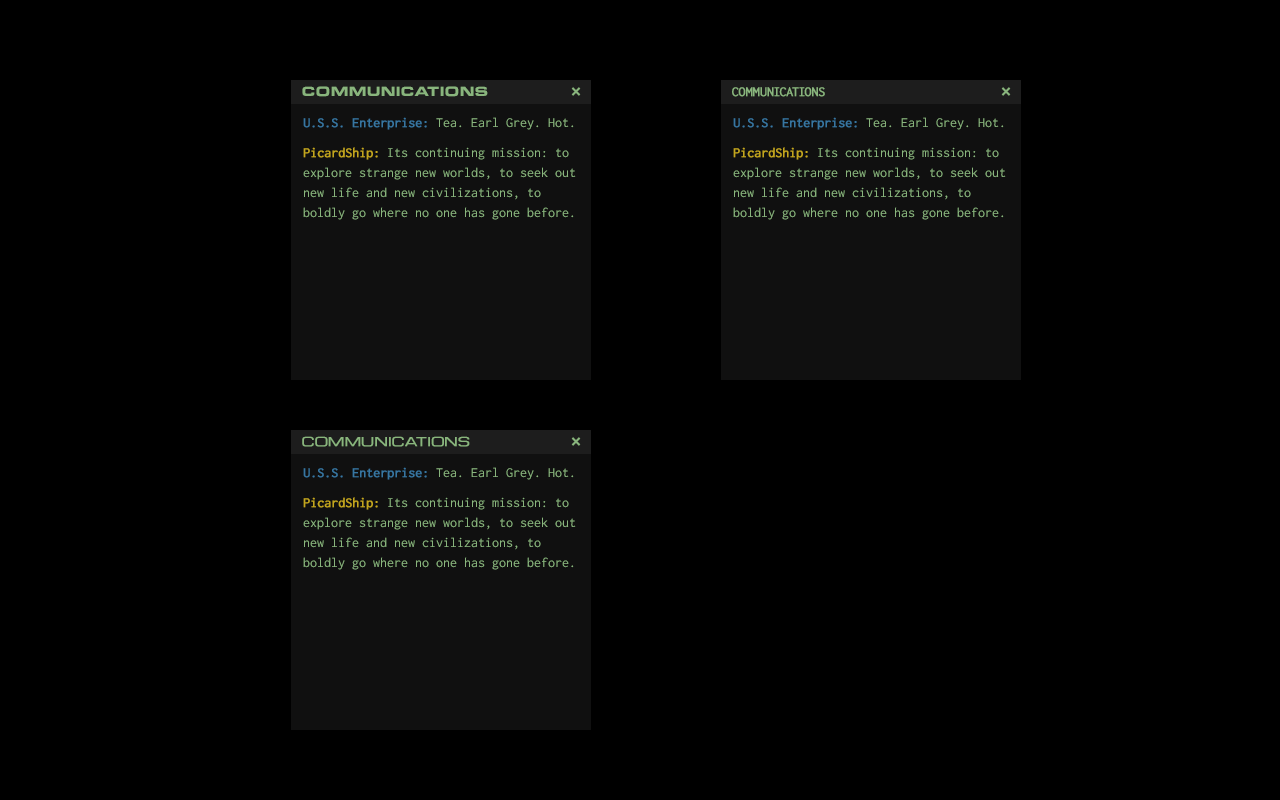
<style>
.page{position:relative;width:1280px;height:800px;background:#000000}
.page>*{position:absolute;margin:0}
.t1{font:14px "EurostileExt-Bla";color:#89b57d}
.t2{font:18px "HelveticaNeue-Bold";color:#89b57d}
.t3{font:14px "Inconsolata";color:#89b57d;font-weight:bold}
.t4{font:14px/20px "Inconsolata";color:#89b57d}
.t5{font:14px/20px "Inconsolata";color:#3776a1;font-weight:bold}
.t6{font:14px/30px "Inconsolata";color:#c3a61e;font-weight:bold}
.t7{font:14px/30px "Inconsolata";color:#89b57d}
.t8{font:12px "Michroma";color:#89b57d;font-weight:bold}
</style>
<div class="page">
<p class="t1" style="left:302px;top:86px;width:186px;height:11px">COMMUNICATIONS</p>
<p class="t2" style="left:571px;top:87px;width:10px;height:9px">×</p>
<p class="t3" style="left:732px;top:87px;width:93px;height:10px">COMMUNICATIONS</p>
<p class="t2" style="left:1001px;top:87px;width:10px;height:9px">×</p>
<p class="t4" style="left:303px;top:117px;width:273px;height:103px"><span class="t5">U.S.S. Enterprise:</span> Tea. Earl Grey. Hot.<br><span class="t6">PicardShip:</span><span class="t7"> Its continuing mission: to </span>explore strange new worlds, to seek out new life and new civilizations, to boldly go where no one has gone before.</p>
<p class="t4" style="left:733px;top:117px;width:273px;height:103px"><span class="t5">U.S.S. Enterprise:</span> Tea. Earl Grey. Hot.<br><span class="t6">PicardShip:</span><span class="t7"> Its continuing mission: to </span>explore strange new worlds, to seek out new life and new civilizations, to boldly go where no one has gone before.</p>
<p class="t8" style="left:302px;top:436px;width:168px;height:11px">COMMUNICATIONS</p>
<p class="t2" style="left:571px;top:437px;width:10px;height:9px">×</p>
<p class="t4" style="left:303px;top:467px;width:273px;height:103px"><span class="t5">U.S.S. Enterprise:</span> Tea. Earl Grey. Hot.<br><span class="t6">PicardShip:</span><span class="t7"> Its continuing mission: to </span>explore strange new worlds, to seek out new life and new civilizations, to boldly go where no one has gone before.</p>
</div>
